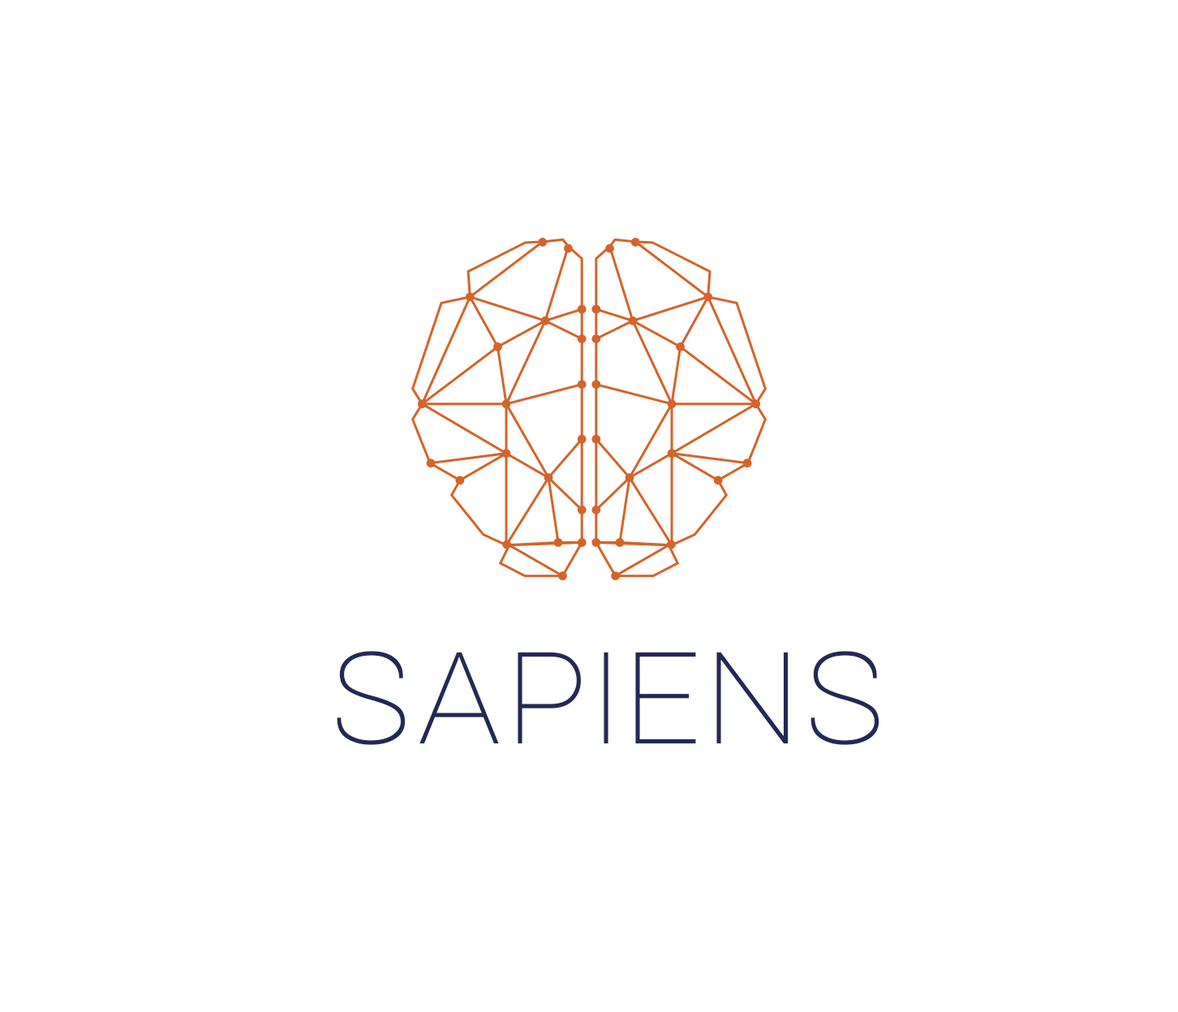
<style>
.page{position:relative;width:1178px;height:1012px;background:#ffffff}
.page>*{position:absolute;margin:0}
.t1{font:159.6px "Roboto-Thin";color:#232955;font-variant:small-caps}
</style>
<div class="page">
<p class="t1" style="left:337px;top:651px;width:543px;height:94px">sapiens</p>
</div>
